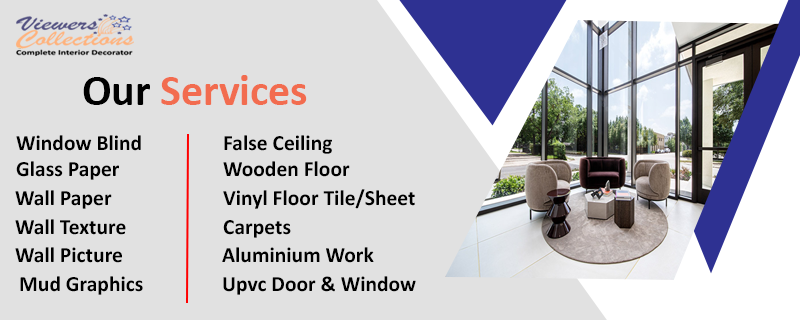
<style>
.page{position:relative;width:800px;height:320px;background:#e1e1e1}
.page>*{position:absolute;margin:0}
.t1{font:43.6px "Calibri-Bold";color:#f26c4f}
.t2{font:43.6px "Calibri-Bold";color:#000000}
.t3{font:21.8px "Calibri-Bold";color:#000000}
</style>
<div class="page">
<p class="t1" style="left:83px;top:75px;width:224px;height:30px"><span class="t2">Our</span> Services</p>
<p class="t3" style="left:16px;top:135px;width:125px;height:16px">Window Blind</p>
<p class="t3" style="left:224px;top:135px;width:108px;height:19px">False Ceiling</p>
<p class="t3" style="left:16px;top:161px;width:103px;height:19px">Glass Paper</p>
<p class="t3" style="left:223px;top:161px;width:127px;height:16px">Wooden Floor</p>
<p class="t3" style="left:15px;top:190px;width:97px;height:19px">Wall Paper</p>
<p class="t3" style="left:223px;top:189px;width:192px;height:20px">Vinyl Floor Tile/Sheet</p>
<p class="t3" style="left:15px;top:219px;width:111px;height:16px">Wall Texture</p>
<p class="t3" style="left:223px;top:220px;width:68px;height:18px">Carpets</p>
<p class="t3" style="left:15px;top:247px;width:107px;height:16px">Wall Picture</p>
<p class="t3" style="left:222px;top:247px;width:152px;height:16px">Aluminium Work</p>
<p class="t3" style="left:20px;top:276px;width:123px;height:19px">Mud Graphics</p>
<p class="t3" style="left:223px;top:276px;width:193px;height:19px">Upvc Door &amp; Window</p>
</div>
